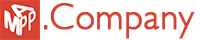
<style>
.page{position:relative;width:200px;height:40px;background:#ffffff}
.page>*{position:absolute;margin:0}
.t1{font:37.8px "GillSans-Light";color:#d84232;font-weight:bold;scale:0.95 1}
</style>
<div class="page">
<p class="t1" style="left:44px;top:3px;width:151px;height:36px">.Company</p>
</div>
